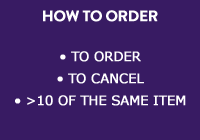
<style>
.page{position:relative;width:200px;height:140px;background:#381b63}
.page>*{position:absolute;margin:0}
.t1{font:15px "BrandonGrotesque-Bold";letter-spacing:-0.02em;color:#ffffff;font-weight:bold}
.t2{font:13px/22px "Verdana";letter-spacing:-0.02em;color:#ffffff;font-weight:bold}
</style>
<div class="page">
<p class="t1" style="left:43px;top:10px;width:115px;height:12px">HOW TO ORDER</p>
<p class="t2" style="left:15px;top:51px;width:171px;height:55px;text-align:center">• TO ORDER<br>• TO CANCEL<br>• &gt;10 OF THE SAME ITEM</p>
</div>
